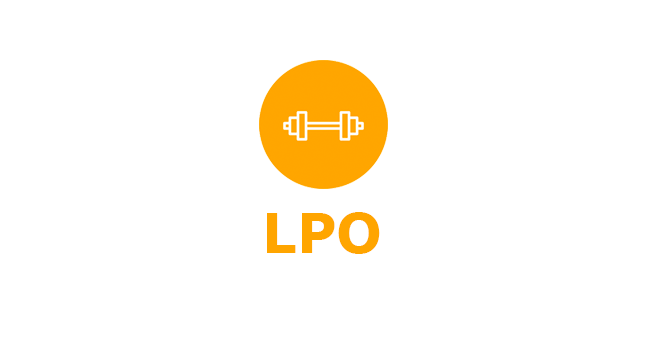
<style>
.page{position:relative;width:650px;height:350px;background:#ffffff}
.page>*{position:absolute;margin:0}
.t1{font:54.6px "Verdana-Bold";color:#ffa500}
</style>
<div class="page">
<p class="t1" style="left:267px;top:212px;width:113px;height:42px">LPO</p>
</div>
